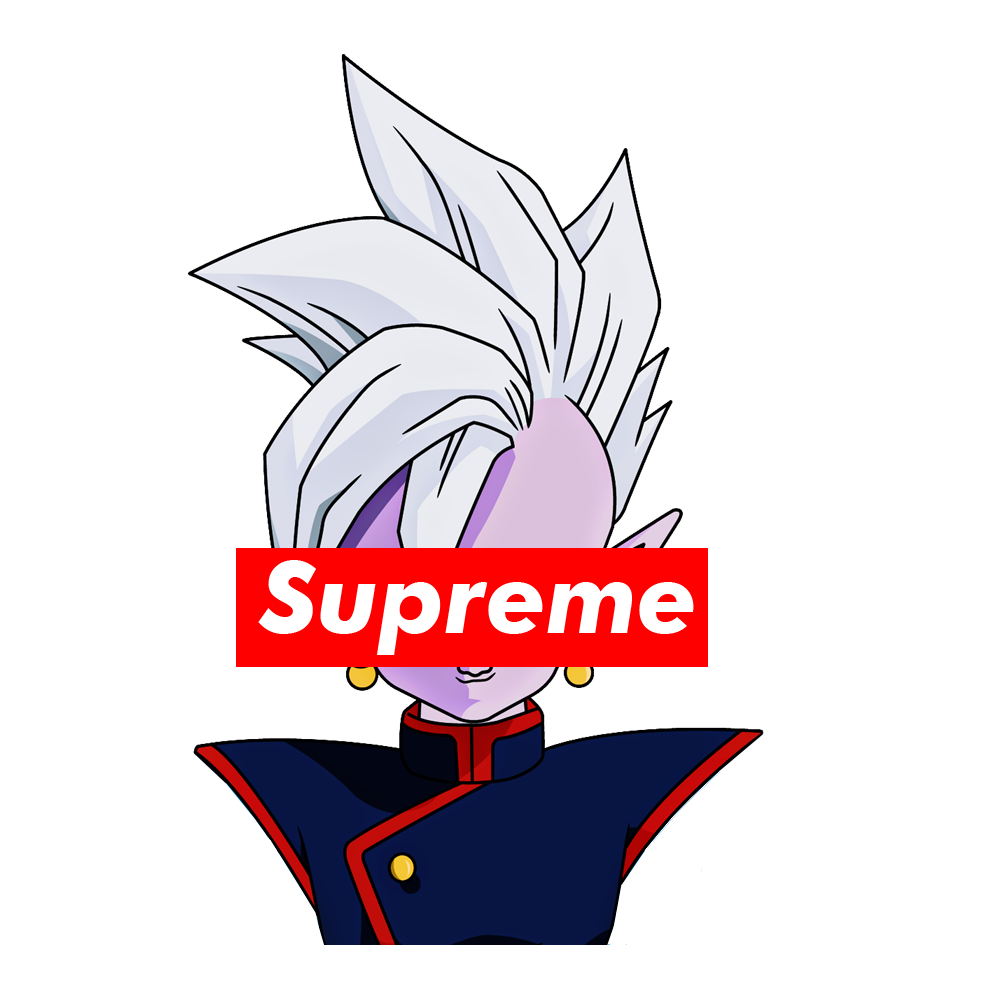
<style>
.page{position:relative;width:1000px;height:1000px;background:#ffffff}
.page>*{position:absolute;margin:0}
.t1{font:100px "FuturaBT-BoldItalic";color:#ffffff}
</style>
<div class="page">
<p class="t1" style="left:258px;top:560px;width:436px;height:95px">Supreme</p>
</div>
